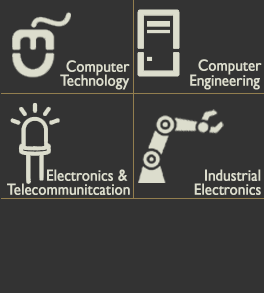
<style>
.page{position:relative;width:264px;height:293px;background:#333333}
.page>*{position:absolute;margin:0}
.t1{font:16.1px "GillSansMT";color:#dcddcd;font-weight:bold;scale:0.89 1}
</style>
<div class="page">
<p class="t1" style="left:66px;top:60px;width:64px;height:16px">Computer</p>
<p class="t1" style="left:198px;top:59px;width:64px;height:16px">Computer</p>
<p class="t1" style="left:60px;top:74px;width:70px;height:16px">Technology</p>
<p class="t1" style="left:190px;top:74px;width:70px;height:16px">Engineering</p>
<p class="t1" style="left:47px;top:169px;width:81px;height:12px">Electronics &amp;</p>
<p class="t1" style="left:205px;top:169px;width:56px;height:12px">Industrial</p>
<p class="t1" style="left:7px;top:183px;width:123px;height:12px">Telecommunitcation</p>
<p class="t1" style="left:194px;top:183px;width:67px;height:12px">Electronics</p>
</div>
